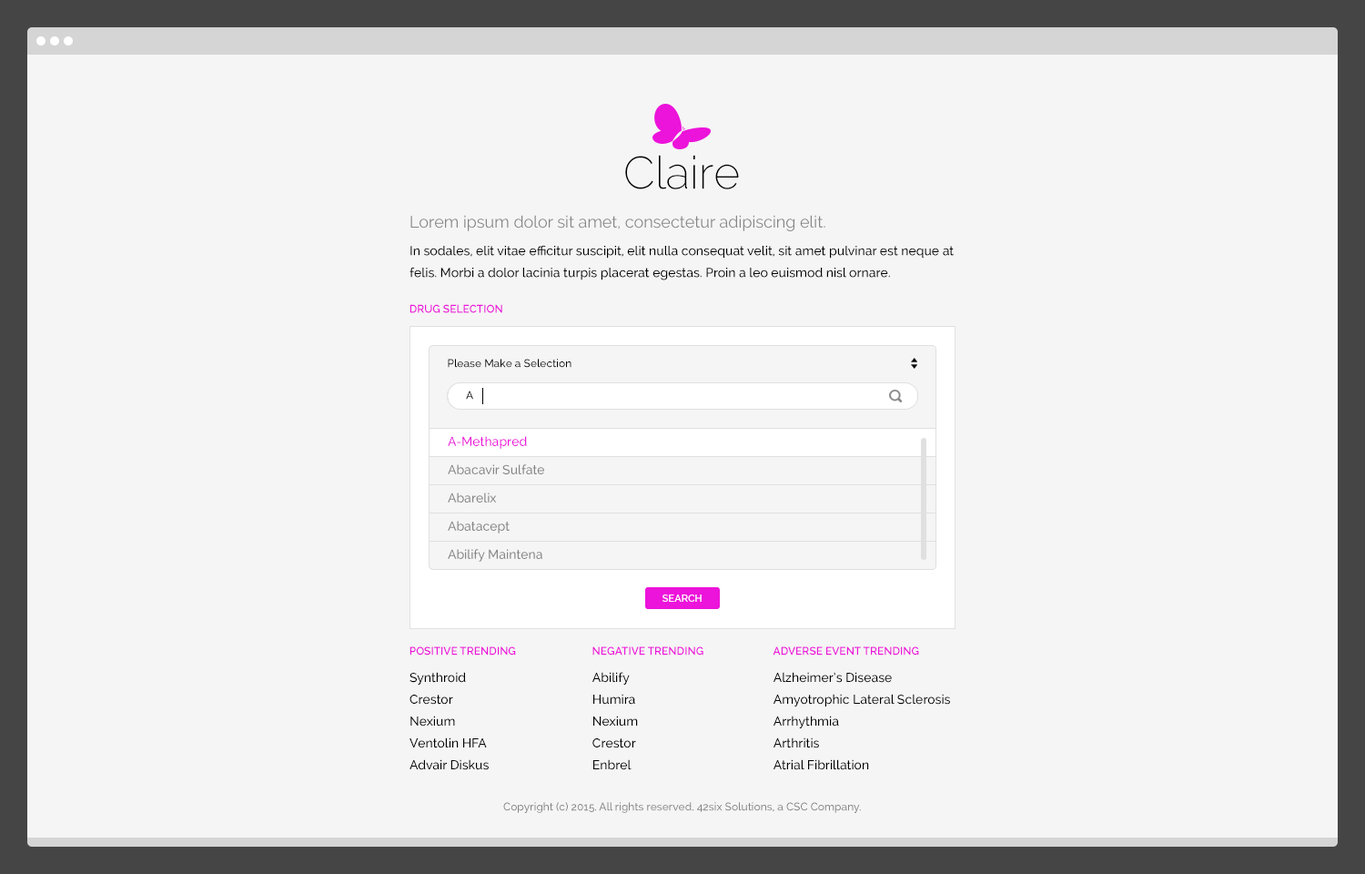
<style>
.page{position:relative;width:1365px;height:874px;background:#f5f5f5}
.page>*{position:absolute;margin:0}
.t1{font:45.7px "Raleway-ExtraLight";color:#000000}
.t2{font:16.4px "Raleway-Regular";color:#858585}
.t3{font:12.7px/21.8px "Raleway-Medium";color:#000000}
.t4{font:10.9px "Raleway-SemiBold";color:#ec13da;text-transform:uppercase}
.t5{font:10.9px "Raleway-Medium";color:#000000}
.t6{font:10.9px "Raleway-Medium"}
.t7{font:12.7px "Raleway-Medium";color:#ec13da}
.t8{font:12.7px "Raleway-Medium";color:#858585}
.t9{font:10px "Raleway-SemiBold";color:#ffffff;text-transform:uppercase}
.t10{font:10.9px "Raleway-Medium";color:#858585}
</style>
<div class="page">
<p class="t1" style="left:625px;top:155px;width:114px;height:34px">Claire</p>
<p class="t2" style="left:410px;top:215px;width:415px;height:16px">Lorem ipsum dolor sit amet, consectetur adipiscing elit.</p>
<p class="t3" style="left:409px;top:245px;width:545px;height:35px">In sodales, elit vitae efficitur suscipit, elit nulla consequat velit, sit amet pulvinar est neque at felis. Morbi a dolor lacinia turpis placerat egestas. Proin a leo euismod nisl ornare.</p>
<p class="t4" style="left:409px;top:304px;width:93px;height:9px">Drug Selection</p>
<p class="t5" style="left:448px;top:359px;width:123px;height:9px">Please Make a Selection</p>
<p class="t6" style="left:466px;top:390px;width:7px;height:9px">A</p>
<p class="t7" style="left:448px;top:436px;width:79px;height:13px">A-Methapred</p>
<p class="t8" style="left:448px;top:464px;width:96px;height:10px">Abacavir Sulfate</p>
<p class="t8" style="left:448px;top:492px;width:49px;height:10px">Abarelix</p>
<p class="t8" style="left:448px;top:521px;width:62px;height:12px">Abatacept</p>
<p class="t8" style="left:448px;top:549px;width:94px;height:12px">Abilify Maintena</p>
<p class="t9" style="left:662px;top:594px;width:40px;height:8px">Search</p>
<p class="t4" style="left:409px;top:646px;width:107px;height:9px">Positive Trending</p>
<p class="t4" style="left:592px;top:646px;width:111px;height:9px">Negative Trending</p>
<p class="t4" style="left:773px;top:646px;width:146px;height:9px">Adverse Event Trending</p>
<p class="t3" style="left:409px;top:672px;width:80px;height:98px">Synthroid<br>Crestor<br>Nexium<br>Ventolin HFA<br>Advair Diskus</p>
<p class="t3" style="left:592px;top:672px;width:46px;height:98px">Abilify<br>Humira<br>Nexium<br>Crestor<br>Enbrel</p>
<p class="t3" style="left:773px;top:672px;width:177px;height:98px">Alzheimer’s Disease<br>Amyotrophic Lateral Sclerosis<br>Arrhythmia<br>Arthritis<br>Atrial Fibrillation</p>
<p class="t10" style="left:503px;top:802px;width:358px;height:11px">Copyright (c) 2015. All rights reserved. 42six Solutions, a CSC Company.</p>
</div>
